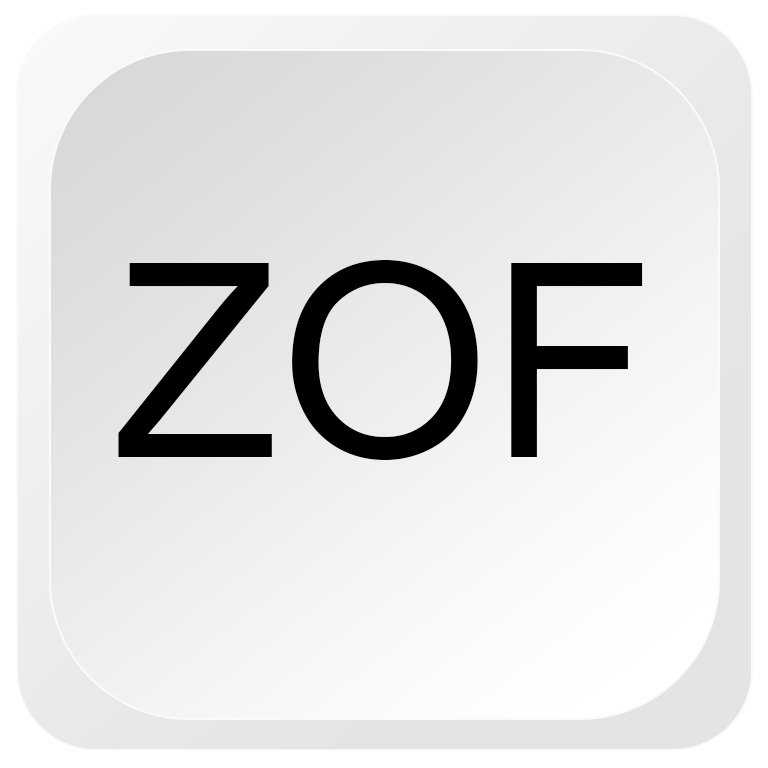
<style>
.page{position:relative;width:768px;height:768px}
.page>*{position:absolute;margin:0}
.t1{font:271px "ArialMT";color:#000000}
</style>
<div class="page">
<p class="t1" style="left:118px;top:260px;width:525px;height:200px">ZOF</p>
</div>
